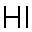
<style>
.page{position:relative;width:32px;height:32px;background:#ffffff}
.page>*{position:absolute;margin:0}
.t1{font:30px "MalgunGothic";color:#000000}
</style>
<div class="page">
<p class="t1" style="left:4px;top:6px;width:24px;height:22px">HI</p>
</div>
